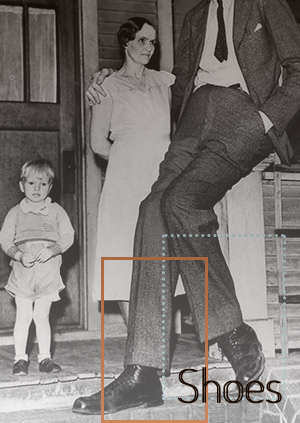
<style>
.page{position:relative;width:300px;height:423px}
.page>*{position:absolute;margin:0}
.t1{font:47px "Dosis-ExtraLight";color:#1d0d03}
</style>
<div class="page">
<p class="t1" style="left:178px;top:367px;width:102px;height:37px">Shoes</p>
<p class="t1" style="left:180px;top:367px;width:102px;height:37px">Shoes</p>
</div>
